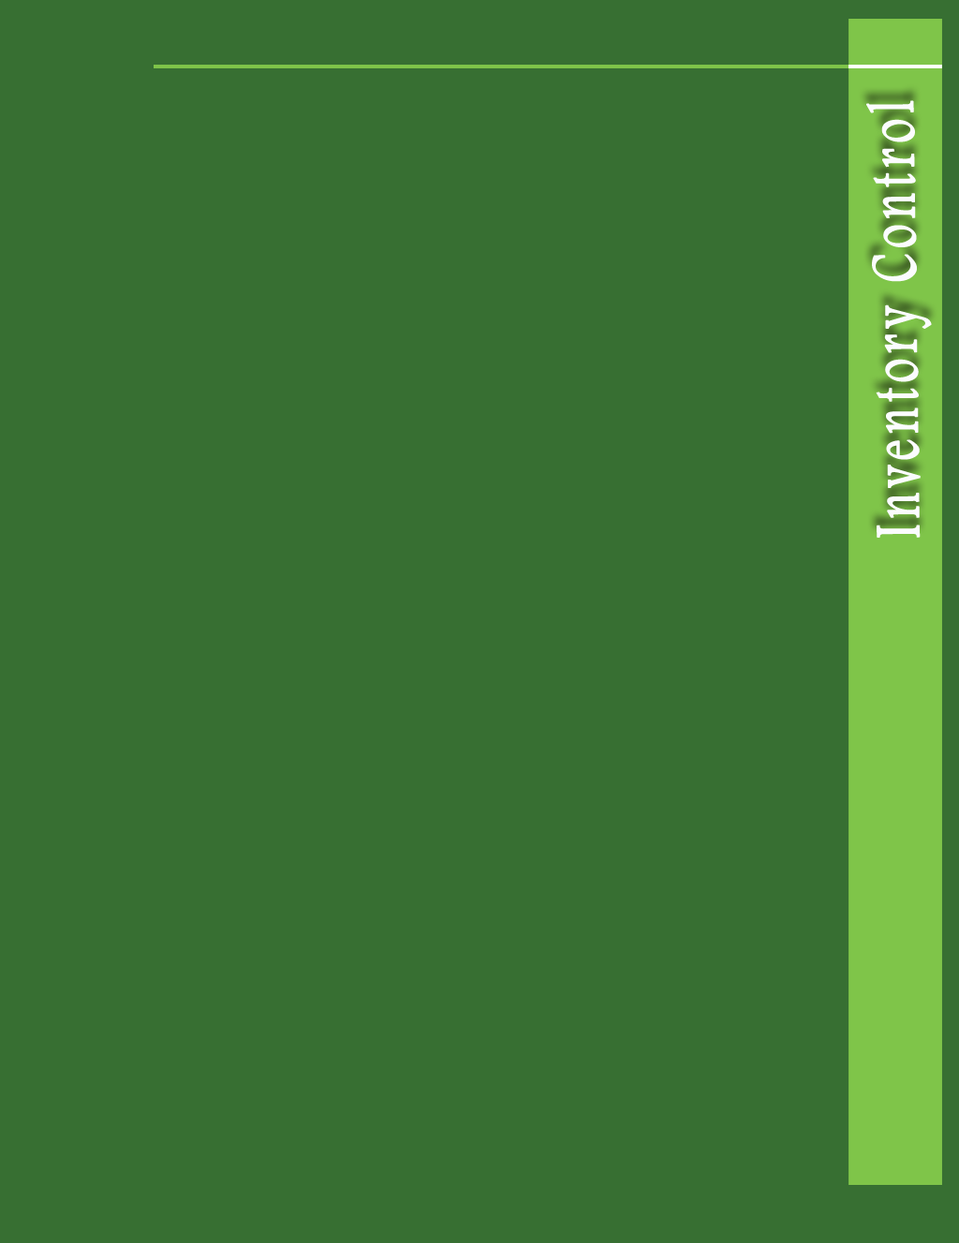
<style>
.page{position:relative;width:959px;height:1243px;background:#376f32}
.page>*{position:absolute;margin:0}
.t1{font:66.4px "FootlightMTLight";letter-spacing:0.1em;color:#fbfcfe;font-weight:bold;scale:0.71 1}
</style>
<div class="page">
<p class="t1" style="left:867px;top:100px;width:65px;height:438px;rotate:-91deg">Inventory Control</p>
</div>
